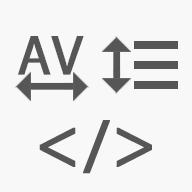
<style>
.page{position:relative;width:192px;height:192px;background:#f8f8f8}
.page>*{position:absolute;margin:0}
.t1{font:55.1px "MyriadPro-Regular";letter-spacing:-0.02em;color:#565656;font-weight:bold}
</style>
<div class="page">
<p class="t1" style="left:18px;top:36px;width:66px;height:39px">AV</p>
</div>
